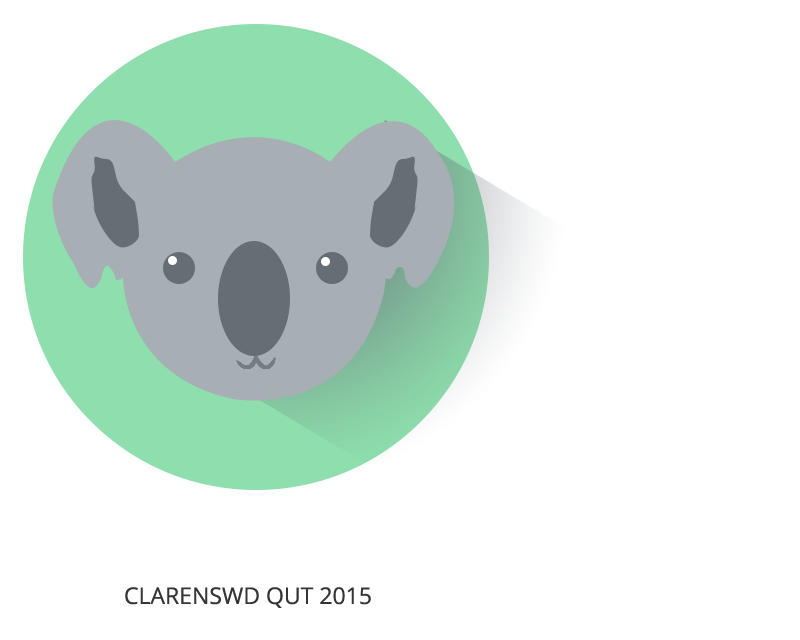
<style>
.page{position:relative;width:800px;height:640px;background:#ffffff}
.page>*{position:absolute;margin:0}
.t1{font:23px "OpenSans";color:#353535;text-transform:uppercase}
</style>
<div class="page">
<p class="t1" style="left:125px;top:587px;width:246px;height:21px">ClarensWD QUT 2015</p>
</div>
